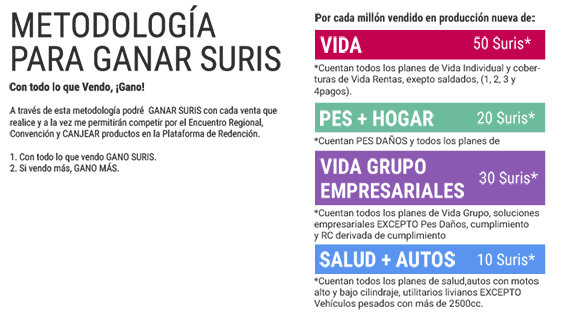
<style>
.page{position:relative;width:562px;height:322px;background:#ffffff}
.page>*{position:absolute;margin:0}
.t1{font:11.2px/20px "RobotoCondensed-Bold";color:#2a2a2a}
.t2{font:34.4px/33.6px "RobotoCondensed-Regular";color:#2a2a2a;text-transform:uppercase}
.t3{font:11.2px "RobotoCondensed-Bold";color:#2a2a2a}
.t4{font:20.8px "RobotoCondensed-Bold";color:#ffffff;text-transform:uppercase}
.t5{font:16px "RobotoCondensed-Regular";color:#ffffff}
.t6{font:9.6px "Roboto-Regular";color:#2a2a2a}
.t7{font:9.6px "RobotoCondensed-Regular";color:#2a2a2a}
.t8{font:9.6px "Roboto-Regular";color:#383838}
.t9{font:20.8px/23.8px "RobotoCondensed-Bold";color:#ffffff;text-transform:uppercase}
</style>
<div class="page">
<p class="t1" style="left:9px;top:5px;width:272px;height:89px"><span class="t2">METODOLOGÍA PARA GANAR SURIS <br></span>Con todo lo que Vendo, ¡Gano!</p>
<p class="t3" style="left:315px;top:12px;width:220px;height:13px">Por cada millón vendido en producción nueva de:</p>
<p class="t4" style="left:319px;top:36px;width:44px;height:17px">vida</p>
<p class="t5" style="left:474px;top:36px;width:57px;height:14px">50 Suris*</p>
<p class="t6" style="left:314px;top:64px;width:227px;height:33px">*Cuentan todos los planes de Vida Individual y coberturas de Vida Rentas, exepto saldados, (1, 2, 3 y 4pagos).</p>
<p class="t7" style="left:9px;top:105px;width:269px;height:69px">A través de esta metodología podré  GANAR SURIS con cada venta que realice y a la vez me permitirán competir por el Encuentro Regional, Convención y CANJEAR productos en la Plataforma de Redención.<br><br>1. Con todo lo que vendo GANO SURIS.<br>2. Si vendo más, GANO MÁS.</p>
<p class="t4" style="left:320px;top:110px;width:114px;height:17px">pes + hogar</p>
<p class="t5" style="left:477px;top:111px;width:58px;height:14px">20 Suris*</p>
<p class="t8" style="left:314px;top:135px;width:186px;height:12px">*Cuentan PES DAÑOS y todos los planes de HOGAR.</p>
<p class="t9" style="left:319px;top:158px;width:145px;height:41px">VIDA GRUPO<br>EMPRESARIALES</p>
<p class="t5" style="left:479px;top:171px;width:59px;height:14px">30 Suris*</p>
<p class="t6" style="left:314px;top:209px;width:225px;height:33px">*Cuentan todos los planes de Vida Grupo, soluciones empresariales EXCEPTO Pes Daños, cumplimiento <br>y RC derivada de cumplimiento</p>
<p class="t4" style="left:319px;top:251px;width:136px;height:17px">salud + autos</p>
<p class="t5" style="left:478px;top:253px;width:57px;height:13px">10 Suris*</p>
<p class="t6" style="left:314px;top:277px;width:225px;height:33px">*Cuentan todos los planes de salud,autos con motos alto y bajo cilindraje, utilitarios livianos EXCEPTO Vehículos pesados con más de 2500cc.</p>
</div>
